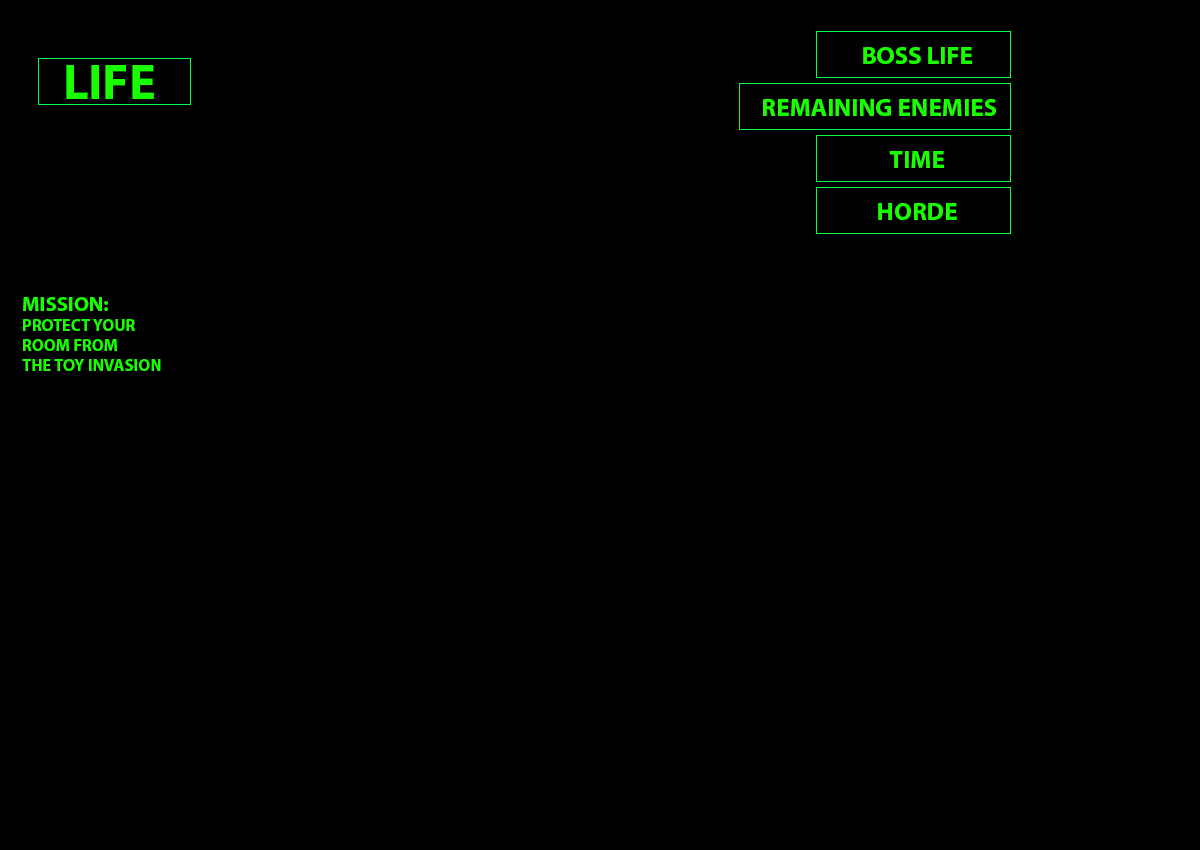
<style>
.page{position:relative;width:1200px;height:850px;background:#000000}
.page>*{position:absolute;margin:0}
.t1{font:25px "MyriadPro-Bold";color:#18ff00}
.t2{font:50px "MyriadPro-Bold";color:#18ff00}
.t3{font:16.7px "MyriadPro-Bold";color:#18ff00}
.t4{font:20.8px "MyriadPro-Bold";color:#18ff00}
</style>
<div class="page">
<p class="t1" style="left:863px;top:47px;width:109px;height:17px">BOSS LIFE</p>
<p class="t2" style="left:66px;top:65px;width:88px;height:34px">LIFE</p>
<p class="t1" style="left:763px;top:99px;width:233px;height:17px">REMAINING ENEMIES</p>
<p class="t1" style="left:889px;top:151px;width:55px;height:17px">TIME</p>
<p class="t1" style="left:878px;top:203px;width:79px;height:17px">HORDE</p>
<p class="t3" style="left:22px;top:297px;width:139px;height:74px"><span class="t4">MISSION: <br></span>PROTECT YOUR<br>ROOM FROM <br>THE TOY INVASION</p>
</div>
